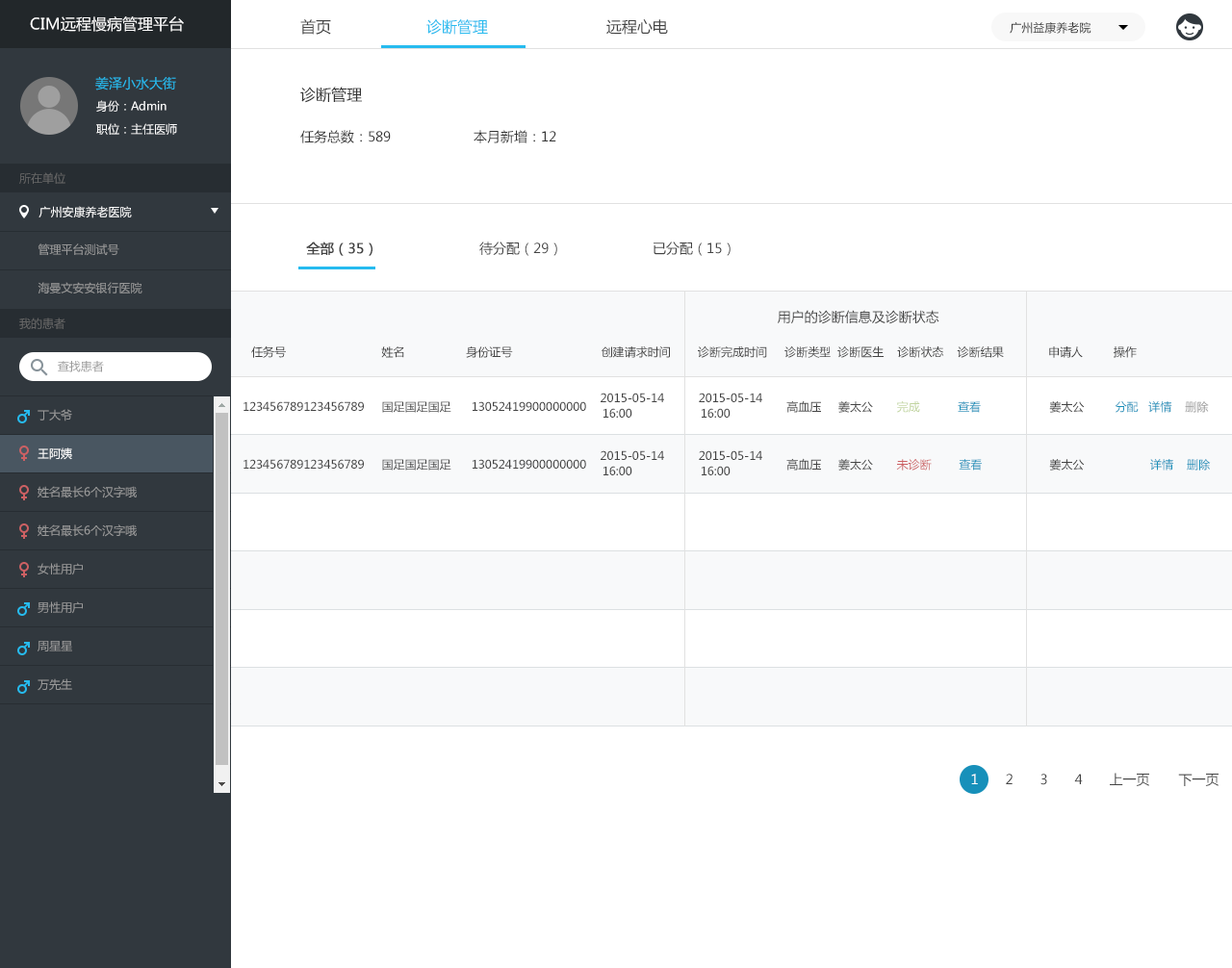
<style>
.page{position:relative;width:1232px;height:968px;background:#ffffff}
.page>*{position:absolute;margin:0}
.t1{font:15.4px "MicrosoftYaHei";color:#ffffff}
.t2{font:15.4px "MicrosoftYaHei";color:#434343}
.t3{font:15.4px "MicrosoftYaHei";color:#26bbef}
.t4{font:11.5px "MicrosoftYaHei";color:#333333}
.t5{font:13.5px "MicrosoftYaHei";color:#26bbef}
.t6{font:15.4px "MicrosoftYaHei";color:#333333}
.t7{font:11.5px "MicrosoftYaHei";color:#ffffff}
.t8{font:13.5px "MicrosoftYaHei";color:#333333}
.t9{font:11.5px "MicrosoftYaHei";color:#666666}
.t10{font:11.5px "MicrosoftYaHei";color:#999999}
.t11{font:13.5px "MicrosoftYaHei";color:#434343}
.t12{font:13.5px "MicrosoftYaHei";color:#434343;font-weight:bold}
.t13{font:11.5px "MicrosoftYaHei";color:#434343}
.t14{font:11.5px/15.4px "MicrosoftYaHei";color:#434343}
.t15{font:11.5px/15.4px "MicrosoftYaHei";color:#c1d4a0}
.t16{font:11.5px/15.4px "MicrosoftYaHei";color:#1790ba}
.t17{font:11.5px/15.4px "MicrosoftYaHei";color:#999999}
.t18{font:11.5px/19.2px "MicrosoftYaHei";color:#999999}
.t19{font:11.5px/19.2px "MicrosoftYaHei";color:#ffffff}
.t20{font:11.5px/15.4px "MicrosoftYaHei";color:#cc6063}
.t21{font:13.5px "MicrosoftYaHei";color:#ffffff}
</style>
<div class="page">
<p class="t1" style="left:30px;top:16px;width:154px;height:16px">CIM远程慢病管理平台</p>
<p class="t2" style="left:300px;top:19px;width:31px;height:16px">首页</p>
<p class="t3" style="left:426px;top:19px;width:62px;height:16px">诊断管理</p>
<p class="t2" style="left:606px;top:19px;width:62px;height:16px">远程心电</p>
<p class="t4" style="left:1009px;top:22px;width:82px;height:12px">广州益康养老院</p>
<p class="t5" style="left:95px;top:76px;width:81px;height:14px">姜泽小水大街</p>
<p class="t6" style="left:300px;top:87px;width:62px;height:16px">诊断管理</p>
<p class="t7" style="left:96px;top:100px;width:70px;height:12px">身份：Admin</p>
<p class="t7" style="left:96px;top:123px;width:81px;height:12px">职位：主任医师</p>
<p class="t8" style="left:300px;top:130px;width:256px;height:13px">任务总数：589   本月新增：12</p>
<p class="t9" style="left:19px;top:172px;width:46px;height:12px">所在单位</p>
<p class="t7" style="left:38px;top:206px;width:94px;height:12px">广州安康养老医院</p>
<p class="t10" style="left:38px;top:243px;width:81px;height:13px">管理平台测试号</p>
<p class="t11" style="left:306px;top:242px;width:424px;height:14px"><span class="t12">全部（35）</span>   待分配（29）   已分配（15）</p>
<p class="t10" style="left:38px;top:282px;width:104px;height:12px">海曼文安安银行医院</p>
<p class="t9" style="left:19px;top:318px;width:46px;height:11px">我的患者</p>
<p class="t11" style="left:778px;top:310px;width:161px;height:14px">用户的诊断信息及诊断状态</p>
<p class="t13" style="left:251px;top:345px;width:885px;height:13px">任务号                            姓名                  身份证号                          创建请求时间        诊断完成时间     诊断类型  诊断医生    诊断状态    诊断结果      申请人         操作</p>
<p class="t10" style="left:58px;top:361px;width:46px;height:11px">查找患者</p>
<p class="t14" style="left:243px;top:393px;width:966px;height:25px">123456789123456789     国足国足国足      13052419900000000    2015-05-14          2015-05-14       高血压     姜太公      <span class="t15"> 完成           </span><span class="t16">查看</span>               姜太公         <span class="t16">分配   详情    </span><span class="t17">删除       <br>                                         </span>16:00                    16:00</p>
<p class="t18" style="left:38px;top:409px;width:99px;height:282px">丁大爷<br><br><span class="t19">王阿姨<br></span><br>姓名最长6个汉字哦<br><br>姓名最长6个汉字哦<br><br>女性用户<br><br>男性用户<br><br>周星星<br><br>万先生<br><br>男女图表请区分<br><br>男性用户<br><br>男性用户<br><br>女性用户<br><br>工程师</p>
<p class="t14" style="left:243px;top:450px;width:968px;height:25px">123456789123456789     国足国足国足      13052419900000000    2015-05-14          2015-05-14       高血压     姜太公       <span class="t20">未诊断        </span><span class="t16">查看</span>                姜太公     <span class="t16">详情    删除       <br>                                         </span>16:00                    16:00</p>
<p class="t11" style="left:971px;top:773px;width:247px;height:13px"><span class="t21">1</span> 2 3 4 上一页 下一页</p>
</div>
